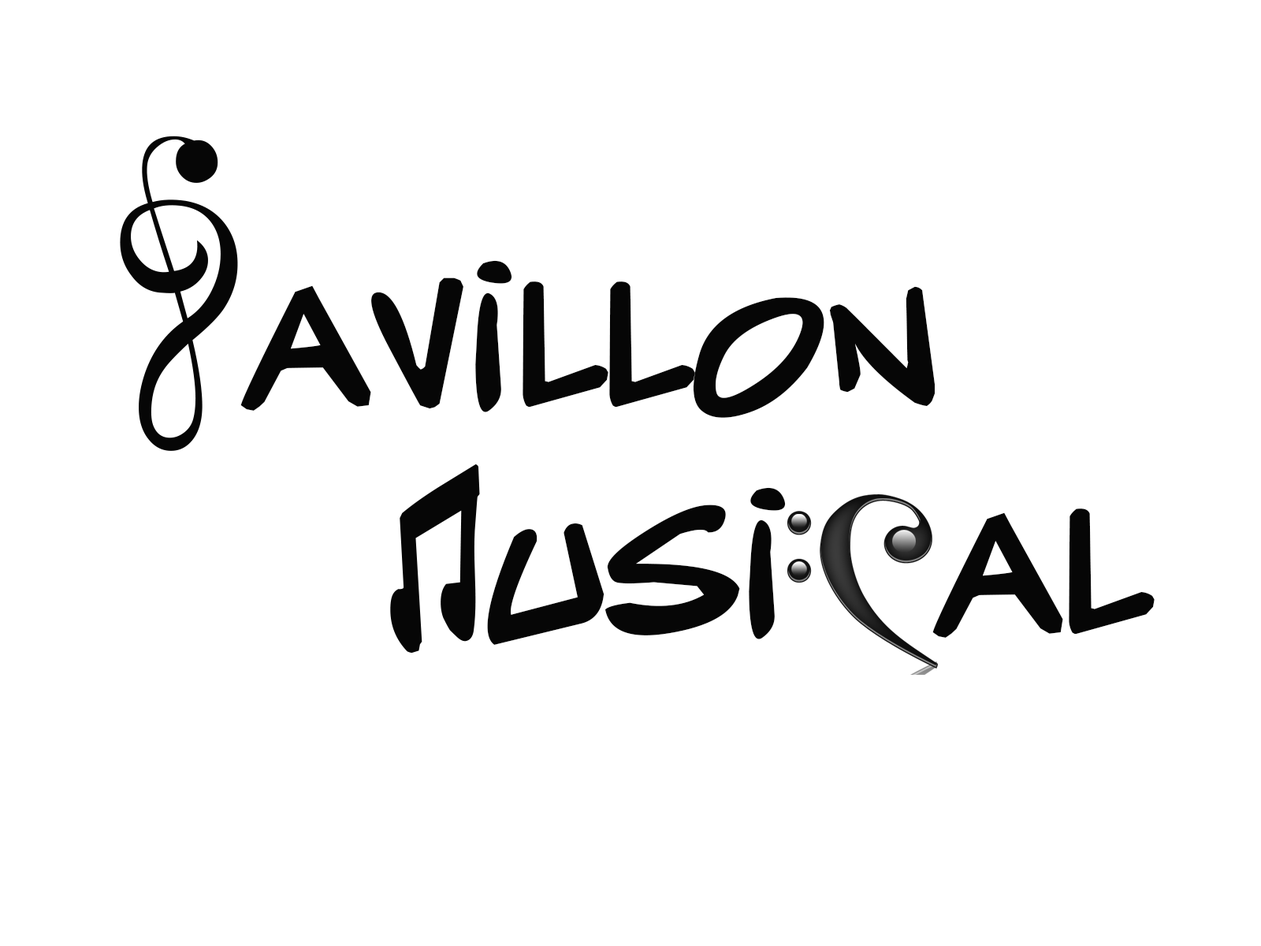
<style>
.page{position:relative;width:1261px;height:946px;background:#ffffff}
.page>*{position:absolute;margin:0}
.t1{font:394px "Musicos-variant-comics";color:#060606}
</style>
<div class="page">
<p class="t1" style="left:240px;top:260px;width:695px;height:158px">avillon</p>
<p class="t1" style="left:487px;top:487px;width:668px;height:158px">usi            al</p>
</div>
